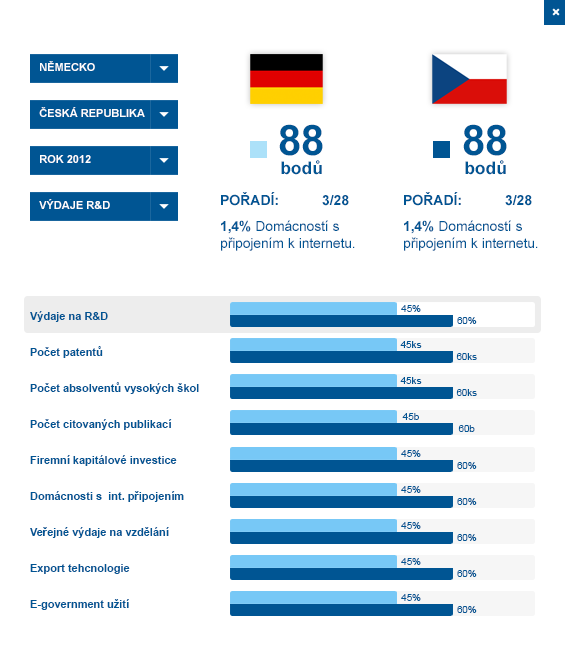
<style>
.page{position:relative;width:565px;height:659px;background:#ffffff}
.page>*{position:absolute;margin:0}
.t1{font:11px "Arial-BoldMT";color:#ffffff;text-transform:uppercase}
.t2{font:17.4px/19.2px "Arial-BoldMT";color:#005593}
.t3{font:42.2px/19.2px "Arial-BoldMT";color:#005593;text-transform:uppercase}
.t4{font:14px "ArialMT";color:#005593}
.t5{font:14px/4px "Arial-BoldMT";color:#005593;text-transform:uppercase}
.t6{font:14px/9px "Arial-BoldMT";color:#005593;text-transform:uppercase}
.t7{font:14px/9px "ArialMT";color:#005593;text-transform:uppercase}
.t8{font:14px/9px "ArialMT";color:#005593}
.t9{font:9.9px "ArialMT";color:#005593;text-transform:uppercase}
.t10{font:9.9px "ArialMT";color:#005593}
.t11{font:11px/36px "Arial-BoldMT";color:#005593}
.t12{font:11px/36px "Arial-BoldMT";color:#005593;text-transform:uppercase}
</style>
<div class="page">
<p class="t1" style="left:40px;top:61px;width:55px;height:10px">německo</p>
<p class="t1" style="left:39px;top:107px;width:106px;height:10px">ČESKÁ REPUBLIKA</p>
<p class="t2" style="left:279px;top:124px;width:44px;height:51px;text-align:center"><span class="t3">88</span><br>bodů</p>
<p class="t2" style="left:463px;top:124px;width:44px;height:51px;text-align:center"><span class="t3">88</span><br>bodů</p>
<p class="t1" style="left:40px;top:155px;width:51px;height:8px">rok 2012</p>
<p class="t4" style="left:221px;top:192px;width:134px;height:59px;text-align:center"><span class="t5">pořadí:        3/28<br><br></span><span class="t6">1,4% </span><span class="t7">d</span><span class="t8">omácností s </span>připojením k internetu.</p>
<p class="t4" style="left:404px;top:192px;width:134px;height:59px;text-align:center"><span class="t5">pořadí:        3/28<br><br></span><span class="t6">1,4% </span><span class="t7">d</span><span class="t8">omácností s </span>připojením k internetu.</p>
<p class="t1" style="left:39px;top:199px;width:71px;height:10px">Výdaje r&amp;d</p>
<p class="t9" style="left:401px;top:305px;width:20px;height:7px">45<span class="t10">%</span></p>
<p class="t11" style="left:30px;top:311px;width:169px;height:299px"><span class="t12">V</span>ýdaje na R&amp;D<br>Počet patentů<br>Počet absolventů vysokých škol<br>Počet citovaných publikací<br>Firemní kapitálové investice<br>Domácnosti s  int. připojením<br>Veřejné výdaje na vzdělání<br>Export tehcnologie<br>E-government užití</p>
<p class="t9" style="left:457px;top:317px;width:20px;height:7px">60<span class="t10">%</span></p>
<p class="t9" style="left:400px;top:341px;width:22px;height:7px">45<span class="t10">ks</span></p>
<p class="t9" style="left:456px;top:353px;width:21px;height:7px">60<span class="t10">ks</span></p>
<p class="t9" style="left:400px;top:377px;width:22px;height:7px">45<span class="t10">ks</span></p>
<p class="t9" style="left:456px;top:389px;width:21px;height:7px">60<span class="t10">ks</span></p>
<p class="t9" style="left:402px;top:413px;width:17px;height:7px">45<span class="t10">b</span></p>
<p class="t9" style="left:458px;top:425px;width:17px;height:7px">60<span class="t10">b</span></p>
<p class="t9" style="left:401px;top:450px;width:20px;height:7px">45<span class="t10">%</span></p>
<p class="t9" style="left:457px;top:462px;width:20px;height:7px">60<span class="t10">%</span></p>
<p class="t9" style="left:401px;top:486px;width:20px;height:7px">45<span class="t10">%</span></p>
<p class="t9" style="left:457px;top:498px;width:20px;height:7px">60<span class="t10">%</span></p>
<p class="t9" style="left:401px;top:522px;width:20px;height:7px">45<span class="t10">%</span></p>
<p class="t9" style="left:457px;top:534px;width:20px;height:7px">60<span class="t10">%</span></p>
<p class="t9" style="left:401px;top:558px;width:20px;height:7px">45<span class="t10">%</span></p>
<p class="t9" style="left:457px;top:570px;width:20px;height:7px">60<span class="t10">%</span></p>
<p class="t9" style="left:401px;top:594px;width:20px;height:7px">45<span class="t10">%</span></p>
<p class="t9" style="left:457px;top:606px;width:20px;height:7px">60<span class="t10">%</span></p>
</div>
